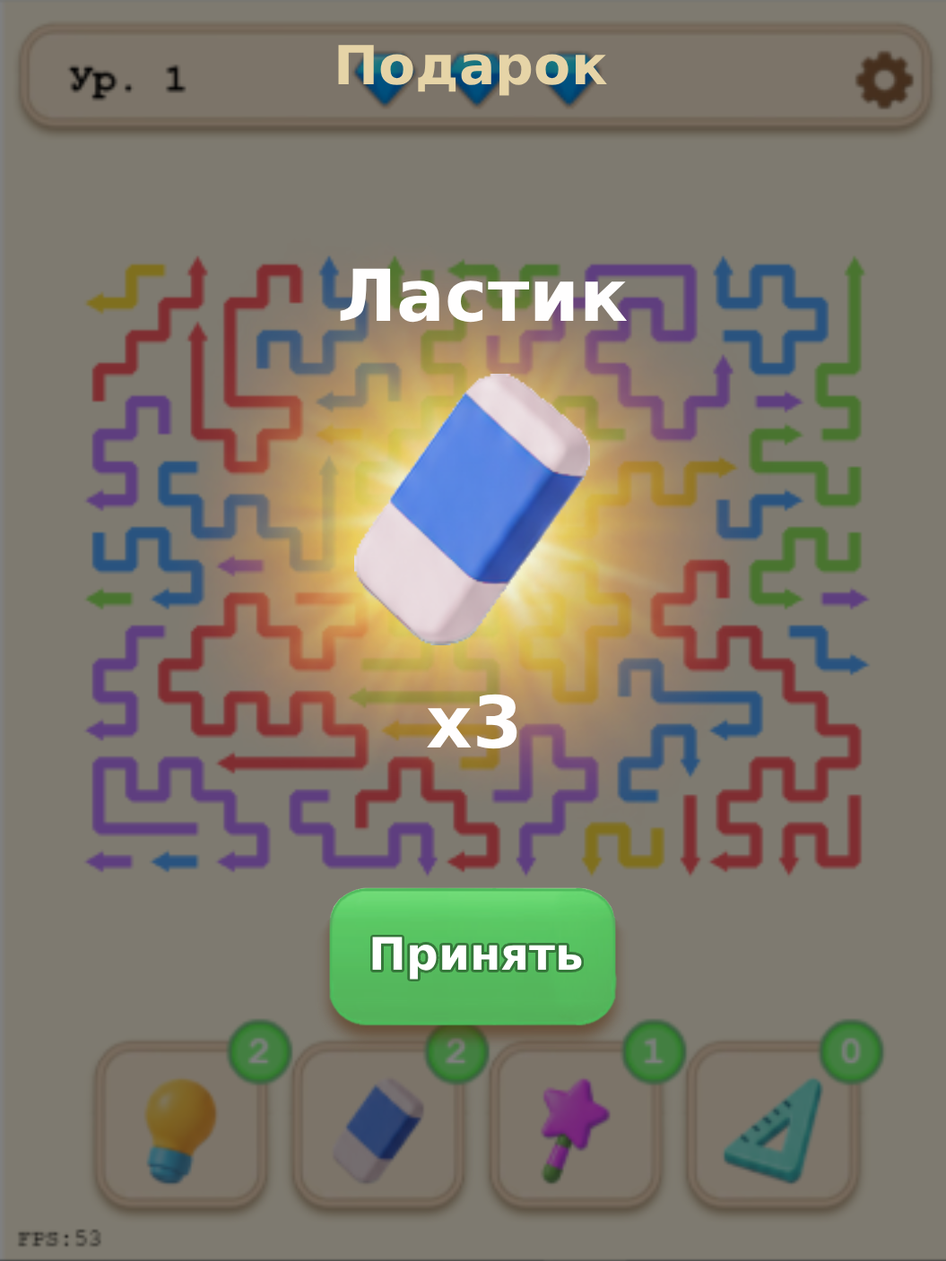
<style>
.page{position:relative;width:946px;height:1261px;background:#7e7a70}
.page>*{position:absolute;margin:0}
.t1{font:53.8px "DejaVuSans-Bold";color:#e6d4a7}
.t2{font:71.7px "DejaVuSans-Bold";color:#fffefe}
.t3{font:44.8px "DejaVuSans-Bold";color:#ffffff}
</style>
<div class="page">
<p class="t1" style="left:338px;top:45px;width:269px;height:51px">Подарок</p>
<p class="t2" style="left:340px;top:268px;width:287px;height:55px">Ластик</p>
<p class="t2" style="left:427px;top:694px;width:90px;height:55px">x3</p>
<p class="t3" style="left:372px;top:937px;width:210px;height:43px">Принять</p>
</div>
